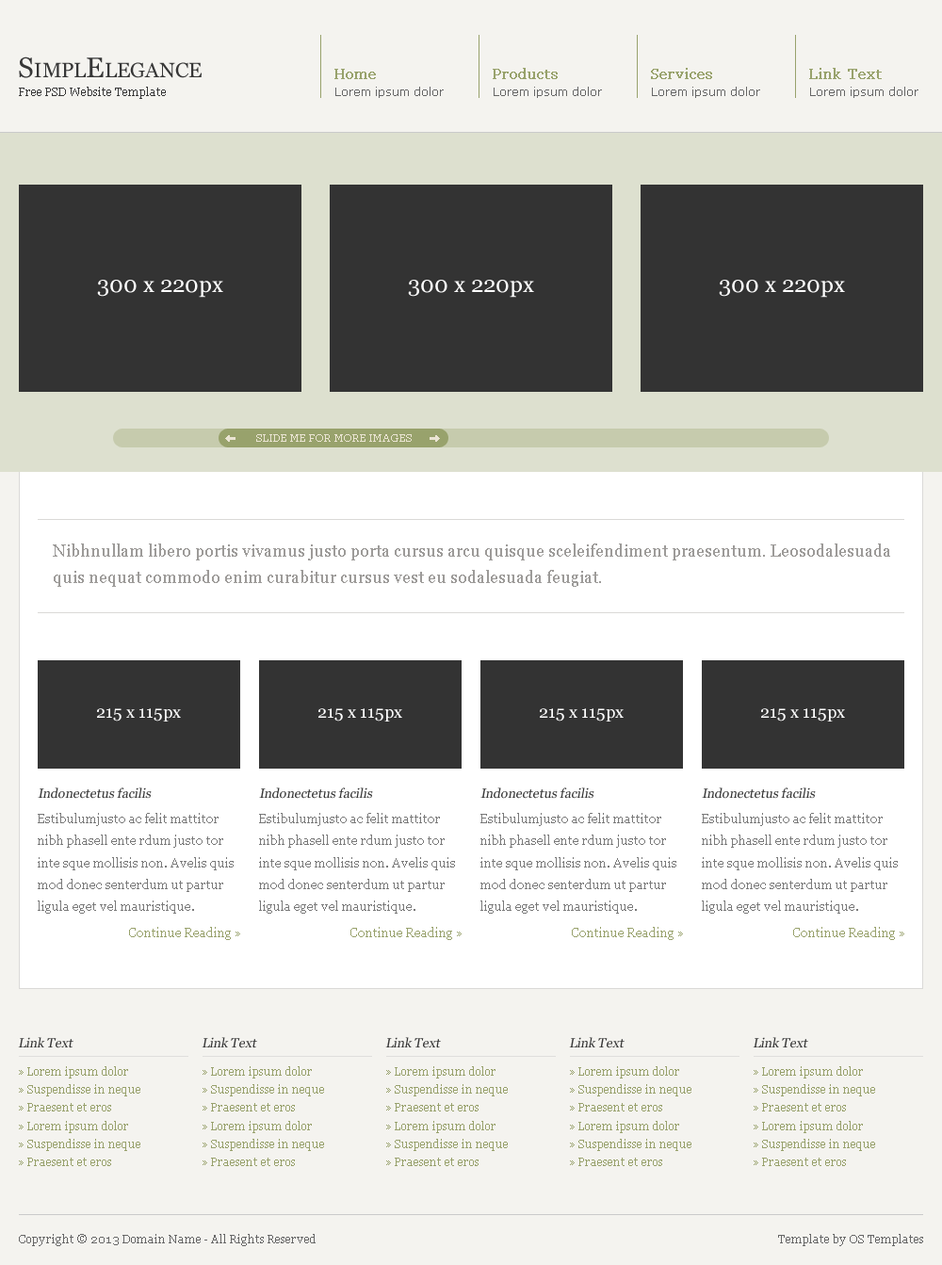
<style>
.page{position:relative;width:942px;height:1265px;background:#ffffff}
.page>*{position:absolute;margin:0}
.t1{font:20.7px "Georgia";color:#373737}
.t2{font:28.3px "Georgia";color:#373737}
.t3{font:15.1px "Georgia";color:#98a26c;font-weight:bold}
.t4{font:11.3px "Georgia";color:#373737}
.t5{font:11.3px "Verdana";color:#666666}
.t6{font:22.6px "Georgia";color:#ffffff}
.t7{font:10.4px "Georgia";color:#eae4d2}
.t8{font:17px/27.1px "Georgia";color:#9d9b99}
.t9{font:17px "Georgia";color:#ffffff}
.t10{font:13.2px "Georgia";color:#373737;font-style:italic}
.t11{font:12.2px/22px "Georgia";color:#797979}
.t12{font:12.2px "Georgia";color:#98a16c}
.t13{font:11.3px/18.1px "Georgia";color:#98a16c}
.t14{font:11.3px/11.3px "Georgia";color:#98a16c}
.t15{font:11.3px "Georgia";color:#666666}
</style>
<div class="page">
<p class="t1" style="left:19px;top:57px;width:183px;height:21px"><span class="t2">S</span>IMPL<span class="t2">E</span>LEGANCE</p>
<p class="t3" style="left:335px;top:69px;width:41px;height:10px">Home</p>
<p class="t3" style="left:493px;top:68px;width:65px;height:11px">Products</p>
<p class="t3" style="left:651px;top:68px;width:61px;height:11px">Services</p>
<p class="t3" style="left:809px;top:68px;width:73px;height:11px">Link Text</p>
<p class="t4" style="left:19px;top:87px;width:147px;height:12px">Free PSD Website Template</p>
<p class="t5" style="left:335px;top:87px;width:109px;height:11px">Lorem ipsum dolor</p>
<p class="t5" style="left:494px;top:87px;width:108px;height:11px">Lorem ipsum dolor</p>
<p class="t5" style="left:652px;top:87px;width:108px;height:11px">Lorem ipsum dolor</p>
<p class="t5" style="left:810px;top:87px;width:109px;height:11px">Lorem ipsum dolor</p>
<p class="t6" style="left:97px;top:280px;width:126px;height:18px">300 x 220px</p>
<p class="t6" style="left:408px;top:280px;width:126px;height:18px">300 x 220px</p>
<p class="t6" style="left:719px;top:280px;width:126px;height:18px">300 x 220px</p>
<p class="t7" style="left:256px;top:434px;width:156px;height:8px">SLIDE ME FOR MORE IMAGES</p>
<p class="t8" style="left:53px;top:544px;width:837px;height:43px">Nibhnullam libero portis vivamus justo porta cursus arcu quisque sceleifendiment praesentum. Leosodalesuada quis nequat commodo enim curabitur cursus vest eu sodalesuada feugiat.</p>
<p class="t9" style="left:97px;top:709px;width:84px;height:13px">215 x 115px</p>
<p class="t9" style="left:318px;top:709px;width:84px;height:13px">215 x 115px</p>
<p class="t9" style="left:540px;top:709px;width:84px;height:13px">215 x 115px</p>
<p class="t9" style="left:761px;top:709px;width:84px;height:13px">215 x 115px</p>
<p class="t10" style="left:38px;top:788px;width:114px;height:11px">Indonectetus facilis</p>
<p class="t10" style="left:259px;top:788px;width:114px;height:11px">Indonectetus facilis</p>
<p class="t10" style="left:481px;top:788px;width:114px;height:11px">Indonectetus facilis</p>
<p class="t10" style="left:702px;top:788px;width:114px;height:11px">Indonectetus facilis</p>
<p class="t11" style="left:38px;top:813px;width:196px;height:101px">Estibulumjusto ac felit mattitor nibh phasell ente rdum justo tor inte sque mollisis non. Avelis quis mod donec senterdum ut partur ligula eget vel mauristique.</p>
<p class="t11" style="left:259px;top:813px;width:196px;height:101px">Estibulumjusto ac felit mattitor nibh phasell ente rdum justo tor inte sque mollisis non. Avelis quis mod donec senterdum ut partur ligula eget vel mauristique.</p>
<p class="t11" style="left:481px;top:813px;width:196px;height:101px">Estibulumjusto ac felit mattitor nibh phasell ente rdum justo tor inte sque mollisis non. Avelis quis mod donec senterdum ut partur ligula eget vel mauristique.</p>
<p class="t11" style="left:702px;top:813px;width:196px;height:101px">Estibulumjusto ac felit mattitor nibh phasell ente rdum justo tor inte sque mollisis non. Avelis quis mod donec senterdum ut partur ligula eget vel mauristique.</p>
<p class="t12" style="left:129px;top:927px;width:111px;height:13px">Continue Reading »</p>
<p class="t12" style="left:351px;top:927px;width:111px;height:13px">Continue Reading »</p>
<p class="t12" style="left:572px;top:927px;width:111px;height:13px">Continue Reading »</p>
<p class="t12" style="left:793px;top:927px;width:112px;height:13px">Continue Reading »</p>
<p class="t10" style="left:18px;top:1037px;width:55px;height:12px">Link Text</p>
<p class="t10" style="left:202px;top:1037px;width:55px;height:12px">Link Text</p>
<p class="t10" style="left:385px;top:1037px;width:56px;height:12px">Link Text</p>
<p class="t10" style="left:569px;top:1037px;width:56px;height:12px">Link Text</p>
<p class="t10" style="left:753px;top:1037px;width:55px;height:12px">Link Text</p>
<p class="t13" style="left:19px;top:1067px;width:121px;height:100px"><span class="t14">» </span>Lorem ipsum dolor<br><span class="t14">» </span>Suspendisse in neque<br><span class="t14">» </span>Praesent et eros<br><span class="t14">» </span>Lorem ipsum dolor<br><span class="t14">» </span>Suspendisse in neque<br><span class="t14">» </span>Praesent et eros</p>
<p class="t13" style="left:203px;top:1067px;width:121px;height:100px"><span class="t14">» </span>Lorem ipsum dolor<br><span class="t14">» </span>Suspendisse in neque<br><span class="t14">» </span>Praesent et eros<br><span class="t14">» </span>Lorem ipsum dolor<br><span class="t14">» </span>Suspendisse in neque<br><span class="t14">» </span>Praesent et eros</p>
<p class="t13" style="left:386px;top:1067px;width:122px;height:100px"><span class="t14">» </span>Lorem ipsum dolor<br><span class="t14">» </span>Suspendisse in neque<br><span class="t14">» </span>Praesent et eros<br><span class="t14">» </span>Lorem ipsum dolor<br><span class="t14">» </span>Suspendisse in neque<br><span class="t14">» </span>Praesent et eros</p>
<p class="t13" style="left:570px;top:1067px;width:122px;height:100px"><span class="t14">» </span>Lorem ipsum dolor<br><span class="t14">» </span>Suspendisse in neque<br><span class="t14">» </span>Praesent et eros<br><span class="t14">» </span>Lorem ipsum dolor<br><span class="t14">» </span>Suspendisse in neque<br><span class="t14">» </span>Praesent et eros</p>
<p class="t13" style="left:754px;top:1067px;width:121px;height:100px"><span class="t14">» </span>Lorem ipsum dolor<br><span class="t14">» </span>Suspendisse in neque<br><span class="t14">» </span>Praesent et eros<br><span class="t14">» </span>Lorem ipsum dolor<br><span class="t14">» </span>Suspendisse in neque<br><span class="t14">» </span>Praesent et eros</p>
<p class="t15" style="left:19px;top:1234px;width:297px;height:13px">Copyright © 2013 Domain Name - All Rights Reserved</p>
<p class="t15" style="left:778px;top:1234px;width:145px;height:13px">Template by OS Templates</p>
</div>
